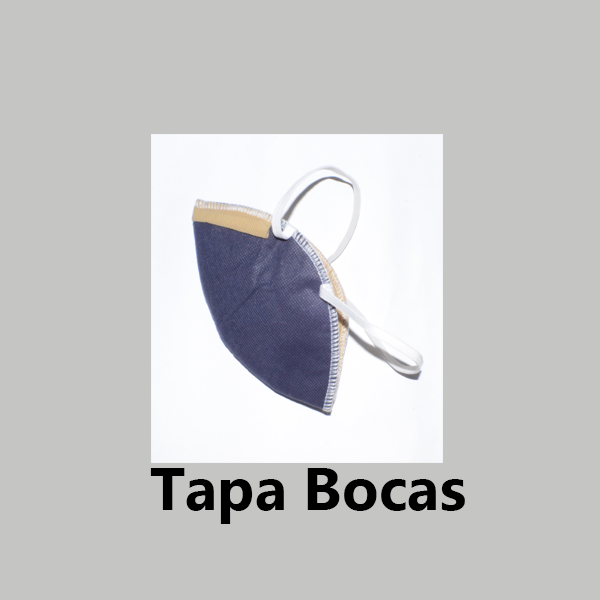
<style>
.page{position:relative;width:600px;height:600px;background:#c5c5c4}
.page>*{position:absolute;margin:0}
.t1{font:60px "Gadugi-Bold";color:#000000}
</style>
<div class="page">
<p class="t1" style="left:150px;top:468px;width:315px;height:56px">Tapa Bocas</p>
</div>
